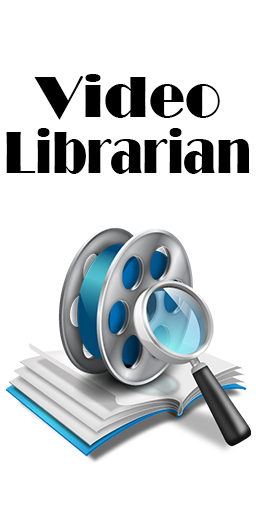
<style>
.page{position:relative;width:256px;height:506px;background:#ffffff}
.page>*{position:absolute;margin:0}
.t1{font:61.1px "Broadway";letter-spacing:-0.01em;color:#000000;scale:0.77 1}
.t2{font:60px "Broadway";color:#000000}
</style>
<div class="page">
<p class="t1" style="left:6px;top:74px;width:244px;height:100px;text-align:center"><span class="t2">Video<br></span>Librarian</p>
</div>
